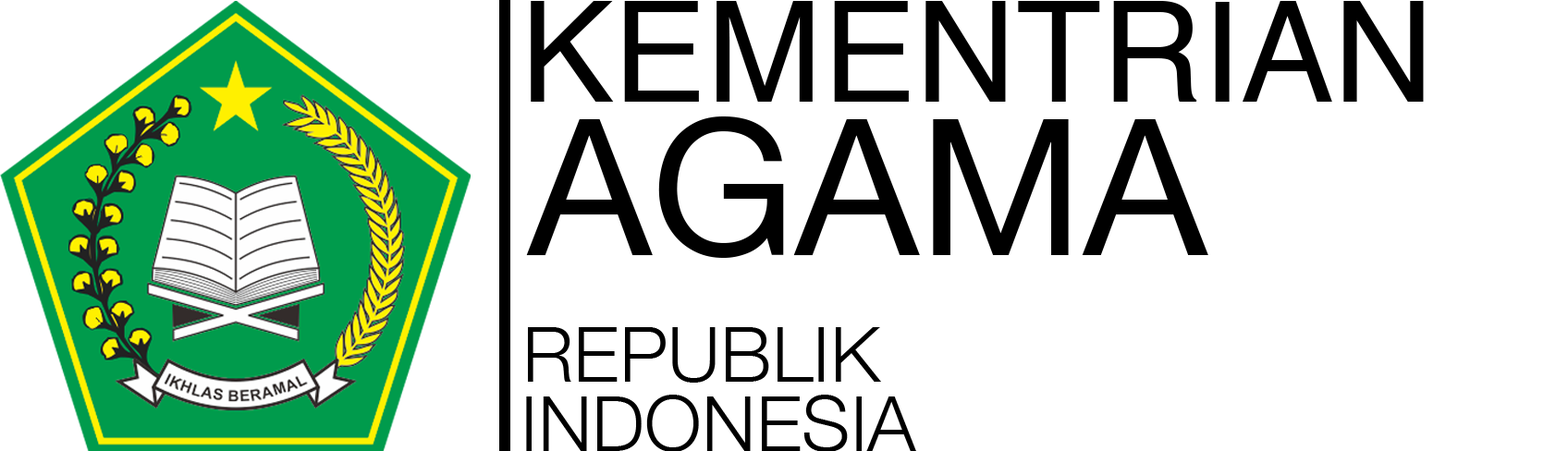
<style>
.page{position:relative;width:1568px;height:451px;background:#ffffff}
.page>*{position:absolute;margin:0}
.t1{font:139.5px "Helvetica";color:#000000}
.t2{font:189.9px "HelveticaNeue";color:#000000}
.t3{font:77px "HelveticaNeue-Light";color:#000000}
</style>
<div class="page">
<p class="t1" style="left:531px;top:1px;width:893px;height:101px">KEMENTRIAN</p>
<p class="t2" style="left:526px;top:116px;width:682px;height:142px">AGAMA</p>
<p class="t3" style="left:528px;top:327px;width:353px;height:56px">REPUBLIK</p>
<p class="t3" style="left:526px;top:395px;width:390px;height:57px">INDONESIA</p>
</div>
